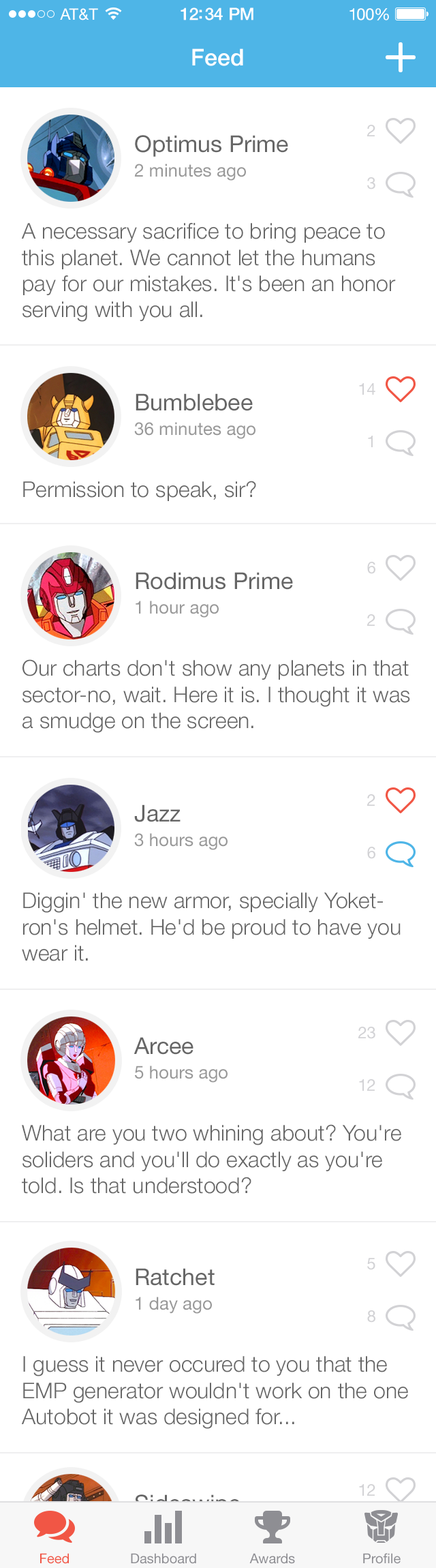
<style>
.page{position:relative;width:436px;height:1568px;background:#ffffff}
.page>*{position:absolute;margin:0}
.t1{font:15.7px "HelveticaNeue";letter-spacing:0.02em;color:#ffffff}
.t2{font:17px "HelveticaNeue-Medium";letter-spacing:-0.02em;color:#ffffff}
.t3{font:16.4px "HelveticaNeue";letter-spacing:-0.02em;color:#ffffff}
.t4{font:23.2px "HelveticaNeue-Medium";color:#ffffff}
.t5{font:16.4px/52.5px "HelveticaNeue";color:#d2d2d5}
.t6{font:23.2px/24.5px "HelveticaNeue";color:#666666}
.t7{font:17.7px/24.5px "HelveticaNeue";color:#999999}
.t8{font:21.8px "HelveticaNeue-Light";color:#666666}
.t9{font:13.6px "HelveticaNeue";color:#f15645}
.t10{font:13.6px "HelveticaNeue";color:#8e8e93}
</style>
<div class="page">
<p class="t1" style="left:60px;top:8px;width:38px;height:12px">AT&amp;T</p>
<p class="t2" style="left:181px;top:7px;width:73px;height:13px">12:34 PM</p>
<p class="t3" style="left:350px;top:8px;width:39px;height:12px">100%</p>
<p class="t4" style="left:192px;top:48px;width:51px;height:18px">Feed</p>
<p class="t5" style="left:367px;top:125px;width:9px;height:65px;text-align:right">2<br>3</p>
<p class="t6" style="left:134px;top:135px;width:154px;height:46px">Optimus Prime<br><span class="t7">2 minutes ago</span></p>
<p class="t8" style="left:21px;top:223px;width:375px;height:99px">A necessary sacrifice to bring peace to this planet. We cannot let the humans pay for our mistakes. It's been an honor serving with you all.</p>
<p class="t5" style="left:359px;top:383px;width:17px;height:64px;text-align:right">14<br>1</p>
<p class="t7" style="left:134px;top:393px;width:122px;height:46px"><span class="t6">Bumblebee<br></span>36 minutes ago</p>
<p class="t8" style="left:23px;top:481px;width:233px;height:20px">Permission to speak, sir?</p>
<p class="t5" style="left:367px;top:562px;width:9px;height:64px;text-align:right">6<br>2</p>
<p class="t6" style="left:136px;top:572px;width:157px;height:46px">Rodimus Prime<br><span class="t7">1 hour ago</span></p>
<p class="t8" style="left:22px;top:659px;width:388px;height:74px">Our charts don't show any planets in that sector-no, wait. Here it is. I thought it was a smudge on the screen.</p>
<p class="t5" style="left:367px;top:794px;width:9px;height:65px;text-align:right">2<br>6</p>
<p class="t7" style="left:134px;top:804px;width:94px;height:46px"><span class="t6">Jazz<br></span>3 hours ago</p>
<p class="t8" style="left:22px;top:892px;width:379px;height:69px">Diggin' the new armor, specially Yoketron's helmet. He'd be proud to have you wear it.</p>
<p class="t7" style="left:134px;top:1037px;width:94px;height:46px"><span class="t6">Arcee<br></span>5 hours ago</p>
<p class="t5" style="left:359px;top:1027px;width:17px;height:64px;text-align:right">23<br>12</p>
<p class="t8" style="left:22px;top:1124px;width:380px;height:70px">What are you two whining about? You're soliders and you'll do exactly as you're told. Is that understood?</p>
<p class="t5" style="left:367px;top:1258px;width:9px;height:65px;text-align:right">5<br>8</p>
<p class="t7" style="left:136px;top:1268px;width:79px;height:46px"><span class="t6">Ratchet<br></span>1 day ago</p>
<p class="t8" style="left:21px;top:1356px;width:387px;height:73px">I guess it never occured to you that the EMP generator wouldn't work on the one Autobot it was designed for...</p>
<p class="t9" style="left:40px;top:1553px;width:29px;height:11px">Feed</p>
<p class="t10" style="left:131px;top:1553px;width:65px;height:11px">Dashboard</p>
<p class="t10" style="left:250px;top:1553px;width:45px;height:11px">Awards</p>
<p class="t10" style="left:363px;top:1553px;width:38px;height:11px">Profile</p>
</div>
